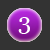
<style>
.page{position:relative;width:50px;height:50px;background:#333333}
.page>*{position:absolute;margin:0}
.t1{font:24px "Georgia";color:#ffffff}
</style>
<div class="page">
<p class="t1" style="left:18px;top:17px;width:12px;height:17px">3</p>
</div>
